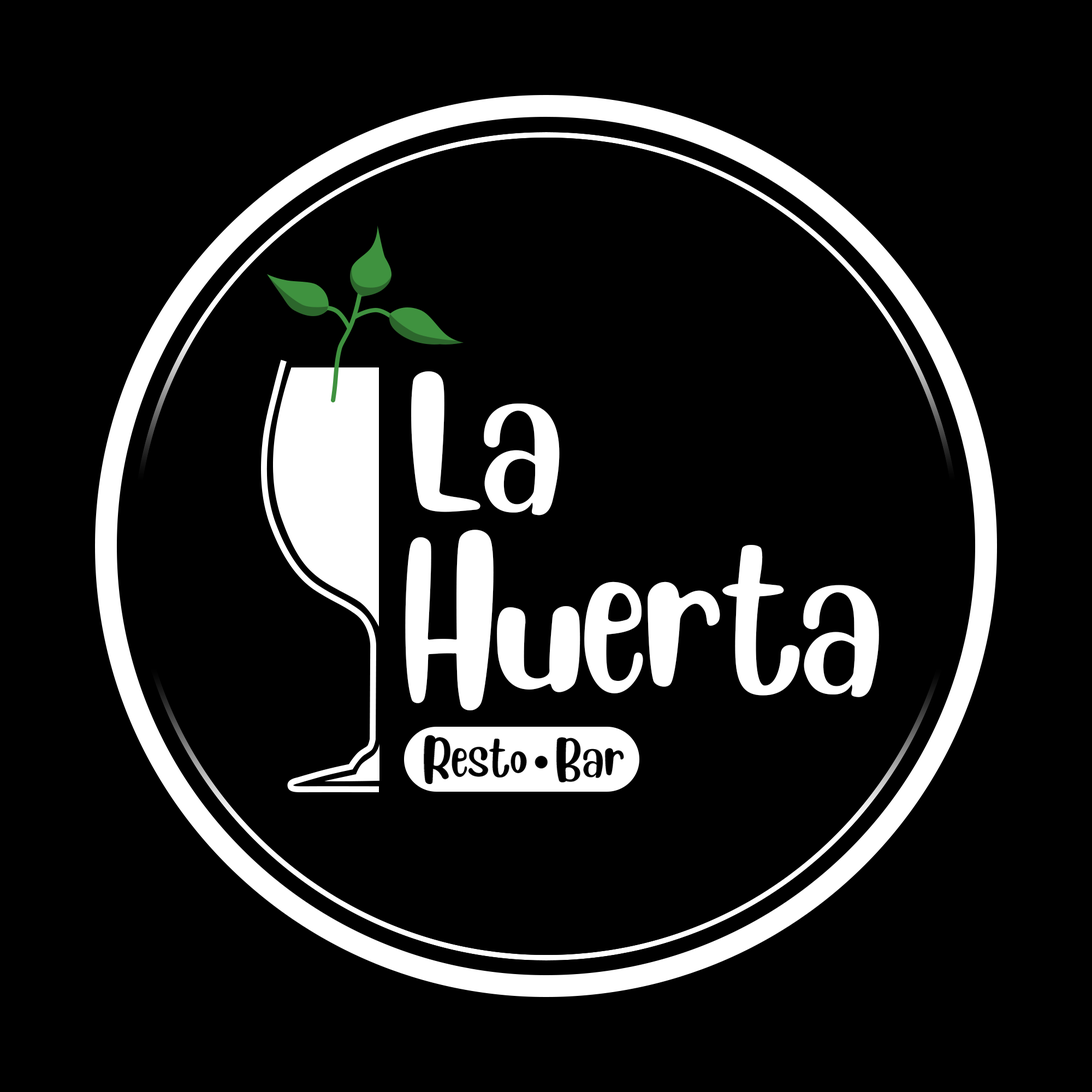
<style>
.page{position:relative;width:1092px;height:1092px;background:#000000}
.page>*{position:absolute;margin:0}
.t1{font:144.3px "Blueberry-Regular";letter-spacing:-0.025em;color:#ffffff}
.t2{font:144.7px "Blueberry-Regular";letter-spacing:-0.025em;color:#ffffff}
.t3{font:172.5px "Blueberry-Regular";letter-spacing:-0.025em;color:#ffffff}
</style>
<div class="page">
<p class="t1" style="left:411px;top:371px;width:149px;height:144px">La</p>
<p class="t2" style="left:405px;top:530px;width:474px;height:180px"><span class="t3">H</span>uerta</p>
</div>
